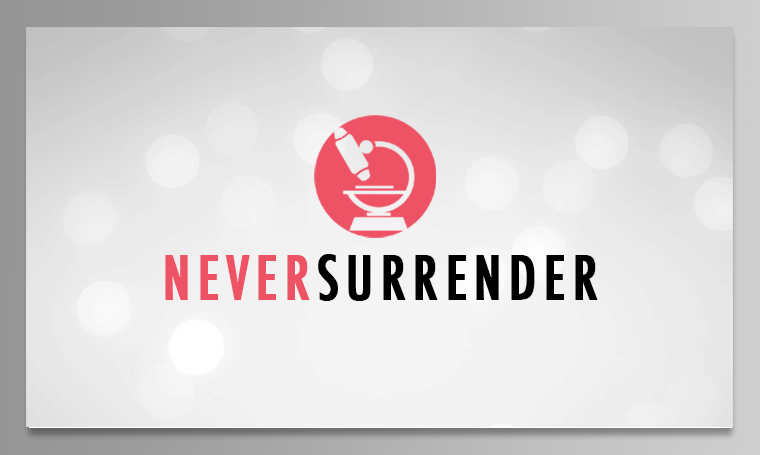
<style>
.page{position:relative;width:760px;height:455px}
.page>*{position:absolute;margin:0}
.t1{font:58.9px "Futura-CondensedMedium";letter-spacing:0.1em;color:#000000;text-transform:uppercase;font-weight:bold}
.t2{font:58.9px "Futura-CondensedMedium";letter-spacing:0.1em;color:#ed5365;text-transform:uppercase;font-weight:bold}
</style>
<div class="page">
<p class="t1" style="left:165px;top:254px;width:433px;height:47px"><span class="t2">NEVER</span>SURRENDER</p>
</div>
